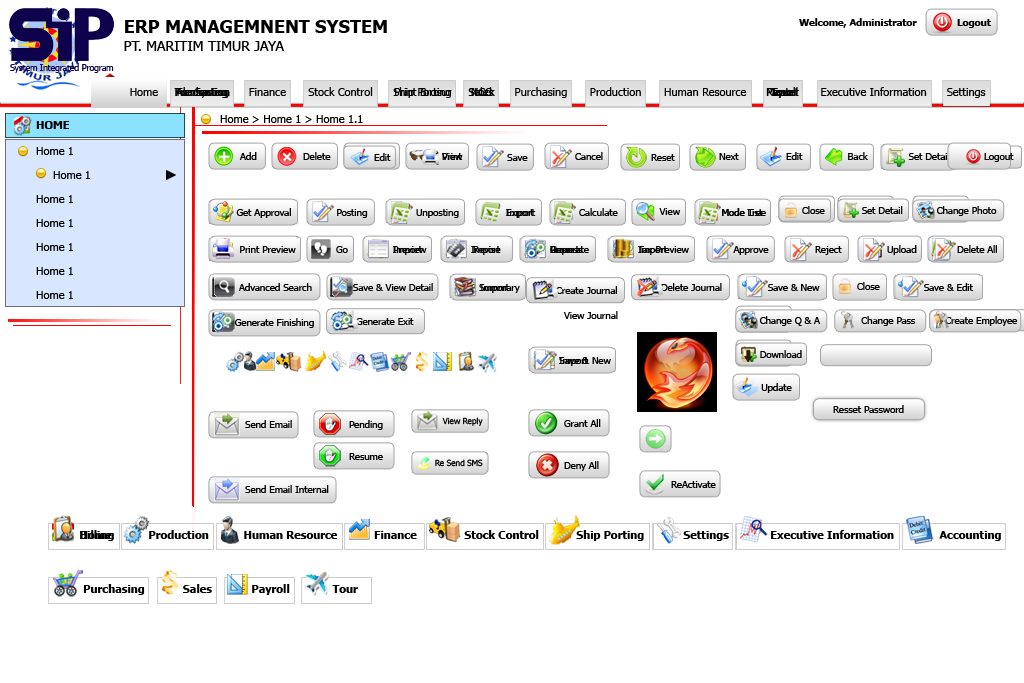
<style>
.page{position:relative;width:1024px;height:683px;background:#ffffff}
.page>*{position:absolute;margin:0}
.t1{font:18px "Tahoma-Bold";color:#000000}
.t2{font:9.7px "Tahoma-Bold";color:#000000}
.t3{font:14px "Tahoma";color:#000000}
.t4{font:8.5px "Tahoma";color:#0e024c}
.t5{font:11px "Tahoma"}
.t6{font:11px "Tahoma";color:#000000}
.t7{font:11px "Tahoma-Bold";color:#000000}
.t8{font:9.7px "Tahoma";color:#000000}
.t9{font:8.3px "Tahoma";color:#000000}
.t10{font:8.2px "Tahoma";color:#000000}
</style>
<div class="page">
<p class="t1" style="left:125px;top:20px;width:262px;height:13px">ERP MANAGEMNENT SYSTEM</p>
<p class="t2" style="left:799px;top:18px;width:118px;height:10px">Welcome, Administrator</p>
<p class="t2" style="left:957px;top:19px;width:34px;height:9px">Logout</p>
<p class="t3" style="left:124px;top:41px;width:160px;height:10px">PT. MARITIM TIMUR JAYA</p>
<p class="t4" style="left:10px;top:63px;width:104px;height:10px">System Integrated Program</p>
<p class="t5" style="left:127px;top:87px;width:28px;height:11px">Billing</p>
<p class="t6" style="left:130px;top:88px;width:28px;height:8px">Home</p>
<p class="t6" style="left:174px;top:88px;width:56px;height:8px">Transaction</p>
<p class="t6" style="left:175px;top:88px;width:54px;height:10px">Accounting</p>
<p class="t6" style="left:175px;top:87px;width:52px;height:11px">Purchasing</p>
<p class="t6" style="left:175px;top:87px;width:55px;height:11px">File System</p>
<p class="t6" style="left:249px;top:88px;width:37px;height:8px">Finance</p>
<p class="t6" style="left:308px;top:87px;width:65px;height:9px">Stock Control</p>
<p class="t6" style="left:393px;top:87px;width:58px;height:11px">Ship Porting</p>
<p class="t6" style="left:395px;top:88px;width:57px;height:8px">Print Brosur</p>
<p class="t6" style="left:468px;top:87px;width:26px;height:9px">Sales</p>
<p class="t6" style="left:468px;top:87px;width:27px;height:9px">Stock</p>
<p class="t6" style="left:471px;top:88px;width:21px;height:8px">NCC</p>
<p class="t6" style="left:515px;top:87px;width:52px;height:11px">Purchasing</p>
<p class="t6" style="left:590px;top:87px;width:51px;height:9px">Production</p>
<p class="t6" style="left:664px;top:88px;width:83px;height:8px">Human Resource</p>
<p class="t6" style="left:766px;top:88px;width:33px;height:8px">Master</p>
<p class="t6" style="left:767px;top:87px;width:31px;height:11px">Payroll</p>
<p class="t6" style="left:767px;top:88px;width:32px;height:10px">Report</p>
<p class="t6" style="left:771px;top:88px;width:22px;height:8px">Tour</p>
<p class="t6" style="left:821px;top:87px;width:106px;height:9px">Executive Information</p>
<p class="t6" style="left:947px;top:88px;width:39px;height:10px">Settings</p>
<p class="t7" style="left:36px;top:121px;width:34px;height:8px">HOME</p>
<p class="t6" style="left:220px;top:115px;width:143px;height:8px">Home &gt; Home 1 &gt; Home 1.1</p>
<p class="t6" style="left:36px;top:147px;width:37px;height:8px">Home 1</p>
<p class="t8" style="left:239px;top:152px;width:18px;height:8px">Add</p>
<p class="t8" style="left:303px;top:152px;width:28px;height:8px">Delete</p>
<p class="t8" style="left:374px;top:153px;width:17px;height:8px">Edit</p>
<p class="t8" style="left:441px;top:153px;width:22px;height:7px">View</p>
<p class="t8" style="left:442px;top:153px;width:20px;height:7px">Print</p>
<p class="t8" style="left:507px;top:154px;width:21px;height:7px">Save</p>
<p class="t8" style="left:575px;top:152px;width:28px;height:8px">Cancel</p>
<p class="t8" style="left:651px;top:154px;width:24px;height:7px">Reset</p>
<p class="t8" style="left:719px;top:153px;width:20px;height:7px">Next</p>
<p class="t8" style="left:786px;top:152px;width:17px;height:8px">Edit</p>
<p class="t8" style="left:848px;top:152px;width:20px;height:8px">Back</p>
<p class="t8" style="left:908px;top:152px;width:42px;height:8px">Set Detail</p>
<p class="t8" style="left:984px;top:153px;width:30px;height:9px">Logout</p>
<p class="t6" style="left:53px;top:171px;width:37px;height:8px">Home 1</p>
<p class="t6" style="left:36px;top:195px;width:37px;height:8px">Home 1</p>
<p class="t8" style="left:236px;top:208px;width:55px;height:10px">Get Approval</p>
<p class="t8" style="left:337px;top:209px;width:31px;height:9px">Posting</p>
<p class="t8" style="left:416px;top:209px;width:43px;height:9px">Unposting</p>
<p class="t8" style="left:506px;top:209px;width:30px;height:9px">Import</p>
<p class="t8" style="left:506px;top:209px;width:28px;height:9px">Export</p>
<p class="t8" style="left:579px;top:208px;width:39px;height:8px">Calculate</p>
<p class="t8" style="left:659px;top:208px;width:22px;height:7px">View</p>
<p class="t8" style="left:722px;top:208px;width:44px;height:8px">Mode Tree</p>
<p class="t8" style="left:722px;top:208px;width:41px;height:8px">Mode List</p>
<p class="t8" style="left:802px;top:206px;width:23px;height:8px">Close</p>
<p class="t8" style="left:862px;top:206px;width:41px;height:8px">Set Detail</p>
<p class="t8" style="left:937px;top:206px;width:60px;height:10px">Change Photo</p>
<p class="t6" style="left:36px;top:219px;width:37px;height:8px">Home 1</p>
<p class="t6" style="left:36px;top:243px;width:37px;height:8px">Home 1</p>
<p class="t8" style="left:240px;top:246px;width:56px;height:7px">Print Preview</p>
<p class="t8" style="left:336px;top:246px;width:12px;height:7px">Go</p>
<p class="t8" style="left:393px;top:246px;width:30px;height:9px">Import</p>
<p class="t8" style="left:393px;top:246px;width:34px;height:7px">Preview</p>
<p class="t8" style="left:471px;top:246px;width:30px;height:9px">Import</p>
<p class="t8" style="left:473px;top:246px;width:28px;height:7px">Revise</p>
<p class="t8" style="left:550px;top:246px;width:30px;height:9px">Import</p>
<p class="t8" style="left:550px;top:246px;width:39px;height:7px">Generate</p>
<p class="t8" style="left:637px;top:246px;width:52px;height:7px">Tax Preview</p>
<p class="t8" style="left:638px;top:246px;width:30px;height:9px">Import</p>
<p class="t8" style="left:733px;top:246px;width:36px;height:9px">Approve</p>
<p class="t8" style="left:815px;top:246px;width:27px;height:9px">Reject</p>
<p class="t8" style="left:887px;top:245px;width:30px;height:10px">Upload</p>
<p class="t8" style="left:957px;top:245px;width:40px;height:8px">Delete All</p>
<p class="t6" style="left:36px;top:267px;width:37px;height:8px">Home 1</p>
<p class="t6" style="left:36px;top:291px;width:37px;height:8px">Home 1</p>
<p class="t8" style="left:238px;top:283px;width:74px;height:8px">Advanced Search</p>
<p class="t8" style="left:353px;top:283px;width:80px;height:8px">Save &amp; View Detail</p>
<p class="t8" style="left:479px;top:284px;width:41px;height:9px">Summary</p>
<p class="t8" style="left:480px;top:284px;width:30px;height:9px">Import</p>
<p class="t8" style="left:556px;top:286px;width:61px;height:8px">Create Journal</p>
<p class="t8" style="left:661px;top:283px;width:61px;height:8px">Delete Journal</p>
<p class="t8" style="left:768px;top:284px;width:52px;height:7px">Save &amp; New</p>
<p class="t8" style="left:857px;top:282px;width:23px;height:8px">Close</p>
<p class="t8" style="left:924px;top:283px;width:49px;height:8px">Save &amp; Edit</p>
<p class="t8" style="left:235px;top:318px;width:79px;height:10px">Generate Finishing</p>
<p class="t8" style="left:356px;top:318px;width:58px;height:7px">Generate Exit</p>
<p class="t8" style="left:563px;top:311px;width:55px;height:8px">View Journal</p>
<p class="t8" style="left:760px;top:316px;width:61px;height:10px">Change Q &amp; A</p>
<p class="t8" style="left:861px;top:316px;width:55px;height:10px">Change Pass</p>
<p class="t8" style="left:945px;top:316px;width:73px;height:10px">Create Employee</p>
<p class="t8" style="left:760px;top:350px;width:42px;height:8px">Download</p>
<p class="t8" style="left:559px;top:357px;width:30px;height:9px">Import</p>
<p class="t8" style="left:559px;top:357px;width:52px;height:7px">Save &amp; New</p>
<p class="t8" style="left:761px;top:383px;width:31px;height:10px">Update</p>
<p class="t8" style="left:833px;top:405px;width:71px;height:8px">Resset Password</p>
<p class="t8" style="left:245px;top:420px;width:47px;height:8px">Send Email</p>
<p class="t8" style="left:349px;top:420px;width:34px;height:10px">Pending</p>
<p class="t9" style="left:442px;top:417px;width:41px;height:9px">View Reply</p>
<p class="t8" style="left:564px;top:419px;width:37px;height:8px">Grant All</p>
<p class="t8" style="left:349px;top:453px;width:34px;height:7px">Resume</p>
<p class="t10" style="left:435px;top:459px;width:48px;height:8px">Re Send SMS</p>
<p class="t8" style="left:564px;top:461px;width:35px;height:10px">Deny All</p>
<p class="t8" style="left:245px;top:485px;width:84px;height:8px">Send Email Internal</p>
<p class="t8" style="left:671px;top:481px;width:45px;height:7px">ReActivate</p>
<p class="t7" style="left:80px;top:531px;width:32px;height:8px">Home</p>
<p class="t7" style="left:80px;top:530px;width:34px;height:11px">Billing</p>
<p class="t7" style="left:149px;top:530px;width:60px;height:9px">Production</p>
<p class="t7" style="left:244px;top:531px;width:94px;height:8px">Human Resource</p>
<p class="t7" style="left:374px;top:531px;width:43px;height:8px">Finance</p>
<p class="t7" style="left:464px;top:530px;width:75px;height:9px">Stock Control</p>
<p class="t7" style="left:576px;top:530px;width:68px;height:11px">Ship Porting</p>
<p class="t7" style="left:683px;top:531px;width:46px;height:10px">Settings</p>
<p class="t7" style="left:771px;top:530px;width:123px;height:9px">Executive Information</p>
<p class="t7" style="left:939px;top:531px;width:62px;height:10px">Accounting</p>
<p class="t7" style="left:83px;top:584px;width:62px;height:11px">Purchasing</p>
<p class="t7" style="left:183px;top:584px;width:29px;height:9px">Sales</p>
<p class="t7" style="left:252px;top:584px;width:38px;height:11px">Payroll</p>
<p class="t7" style="left:332px;top:585px;width:26px;height:8px">Tour</p>
</div>
